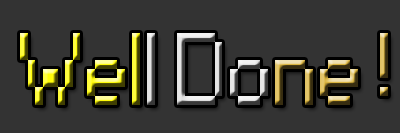
<style>
.page{position:relative;width:400px;height:133px;background:#333333}
.page>*{position:absolute;margin:0}
.t1{font:96px "Small Fonts"}
</style>
<div class="page">
<p class="t1" style="left:20px;top:33px;width:368px;height:72px">Well Done !</p>
</div>
